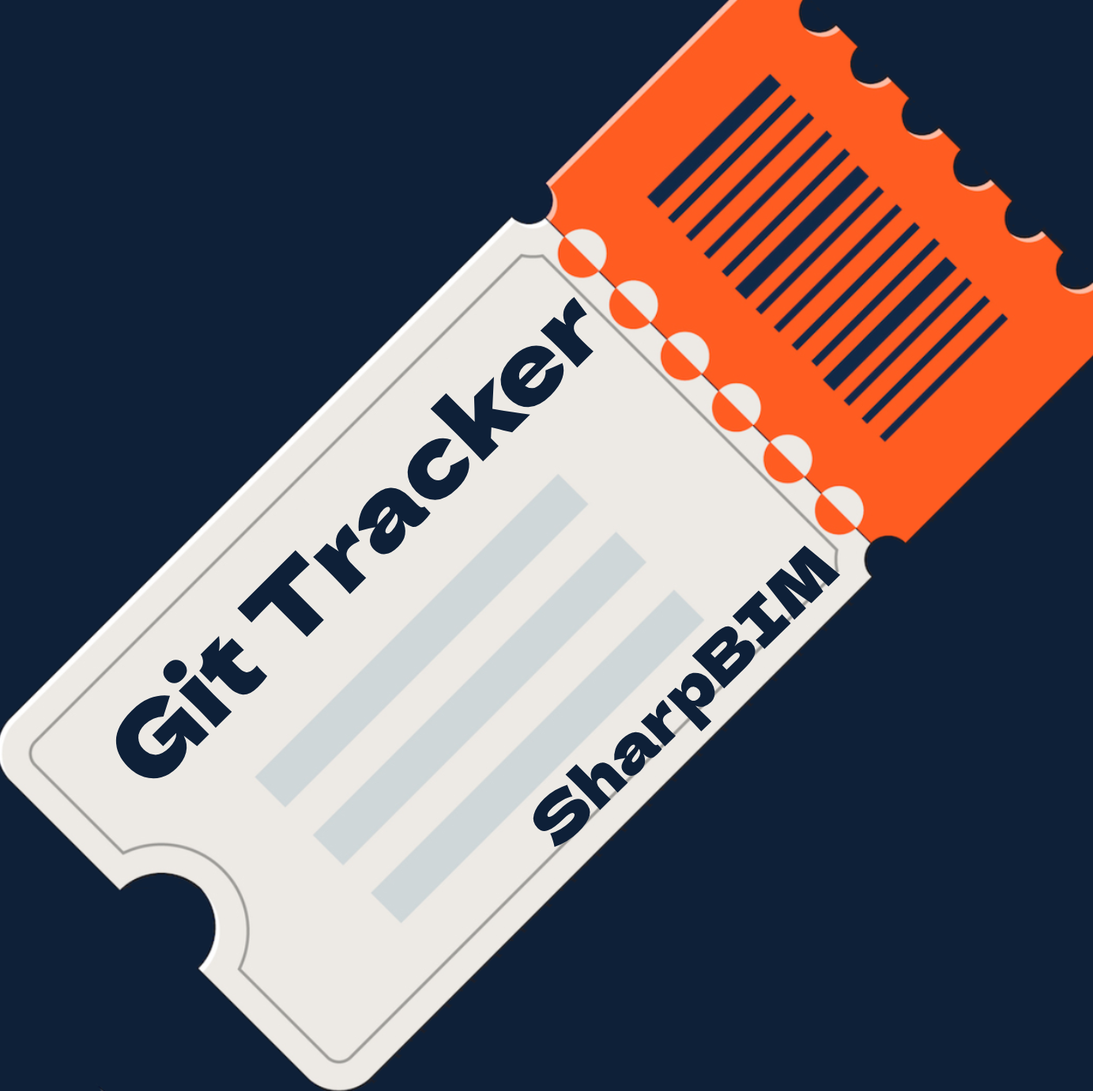
<style>
.page{position:relative;width:1093px;height:1091px;background:#0e2038}
.page>*{position:absolute;margin:0}
.t1{font:95.6px "DelaGothicOne-Regular";color:#0e2038}
.t2{font:63.2px "DelaGothicOne-Regular";color:#0e2038}
</style>
<div class="page">
<p class="t1" style="left:115px;top:297px;width:478px;height:483px;rotate:-45deg">Git Tracker</p>
<p class="t2" style="left:531px;top:545px;width:310px;height:302px;rotate:-44deg">SharpBIM</p>
</div>
